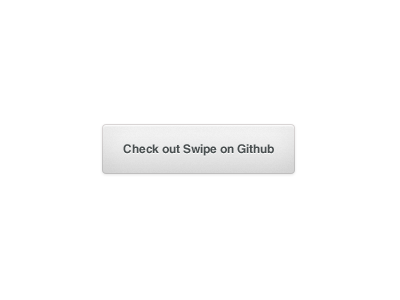
<style>
.page{position:relative;width:400px;height:300px;background:#ffffff}
.page>*{position:absolute;margin:0}
.t1{font:12px "HelveticaLT-Bold";color:#494f50}
</style>
<div class="page">
<p class="t1" style="left:123px;top:144px;width:151px;height:12px">Check out Swipe on Github</p>
</div>
